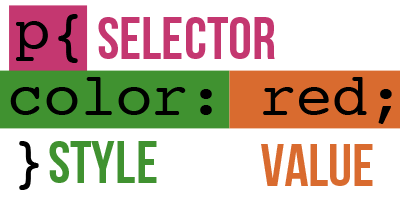
<style>
.page{position:relative;width:400px;height:209px;background:#ffffff}
.page>*{position:absolute;margin:0}
.t1{font:60px "Courier";color:#000000}
.t2{font:60px "BebasNeue";color:#c43770}
.t3{font:60px "BebasNeue";color:#409230}
.t4{font:60px "BebasNeue";color:#d96b2f}
</style>
<div class="page">
<p class="t1" style="left:16px;top:14px;width:62px;height:49px">p{</p>
<p class="t2" style="left:98px;top:17px;width:177px;height:42px">Selector</p>
<p class="t1" style="left:10px;top:77px;width:382px;height:47px">color: red;</p>
<p class="t1" style="left:19px;top:141px;width:20px;height:49px">}</p>
<p class="t3" style="left:49px;top:141px;width:108px;height:42px">style</p>
<p class="t4" style="left:261px;top:144px;width:112px;height:42px">Value</p>
</div>
